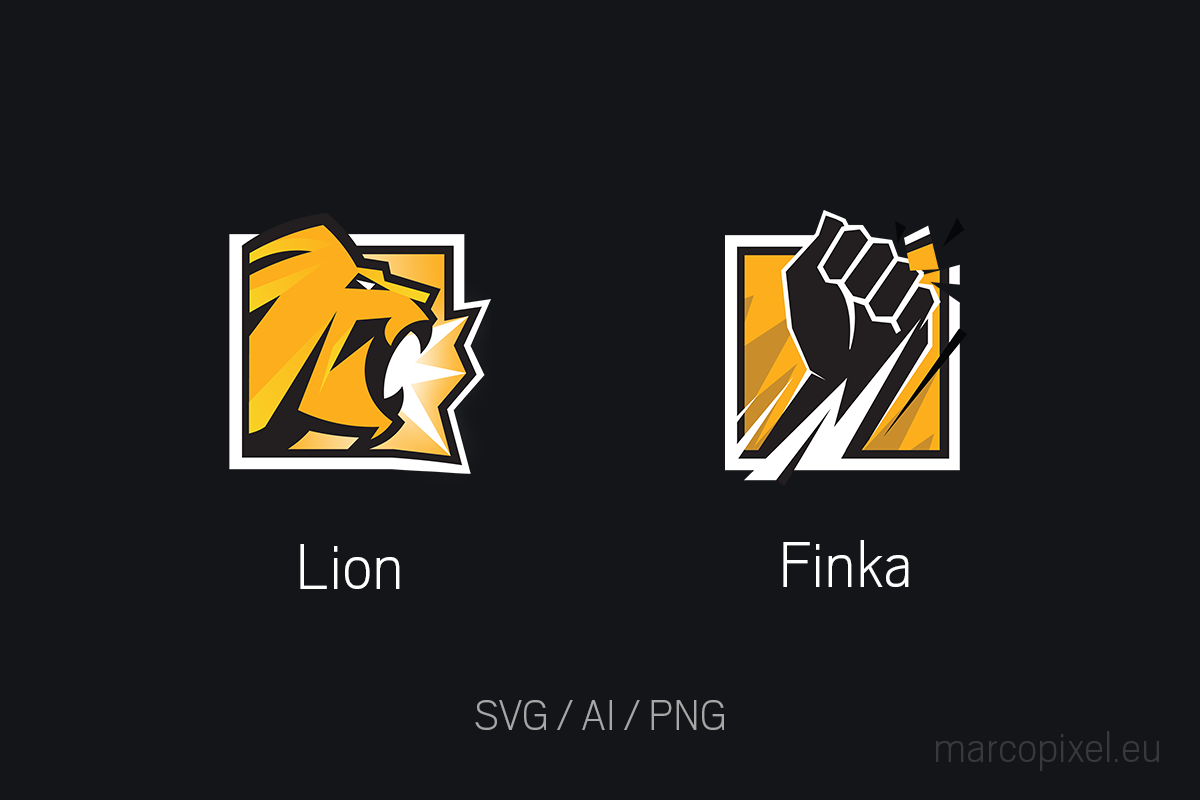
<style>
.page{position:relative;width:1200px;height:800px;background:#141518}
.page>*{position:absolute;margin:0}
.t1{font:72px "Scout-ExtraLight";color:#ffffff}
.t2{font:48px "Scout-ExtraLight";color:#a7a7a8}
.t3{font:48px "Scout-ExtraLight";color:#38393b}
</style>
<div class="page">
<p class="t1" style="left:300px;top:544px;width:100px;height:45px">Lion</p>
<p class="t1" style="left:783px;top:540px;width:126px;height:47px">Finka</p>
<p class="t2" style="left:475px;top:700px;width:249px;height:30px">SVG / AI / PNG</p>
<p class="t3" style="left:936px;top:731px;width:223px;height:40px">marcopixel.eu</p>
</div>
